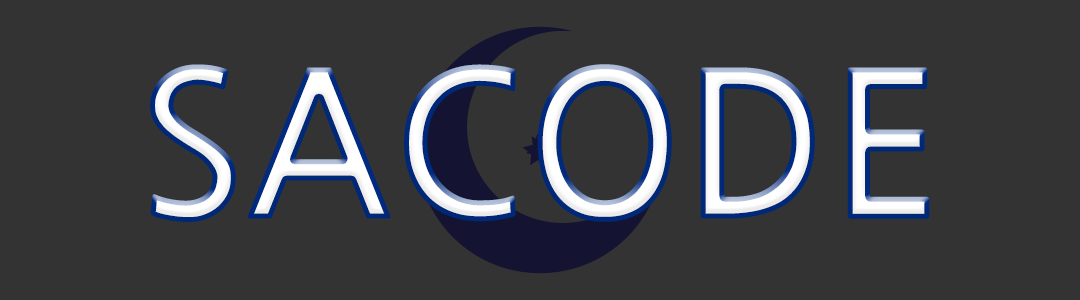
<style>
.page{position:relative;width:1080px;height:300px;background:#333333}
.page>*{position:absolute;margin:0}
.t1{font:200px "NanumGothicBold"}
</style>
<div class="page">
<p class="t1" style="left:150px;top:64px;width:780px;height:158px">SACODE</p>
</div>
